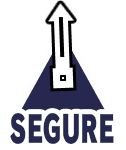
<style>
.page{position:relative;width:126px;height:150px;background:#ffffff}
.page>*{position:absolute;margin:0}
.t1{font:37.3px "RodinNTLGPro-UB";color:#272850;scale:0.62 1}
</style>
<div class="page">
<p class="t1" style="left:10px;top:113px;width:104px;height:31px">SEGURE</p>
</div>
